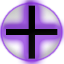
<style>
.page{position:relative;width:64px;height:64px}
.page>*{position:absolute;margin:0}
.t1{font:100px "MyriadPro-Regular";color:#010101}
</style>
<div class="page">
<p class="t1" style="left:6px;top:5px;width:52px;height:54px">+</p>
</div>
